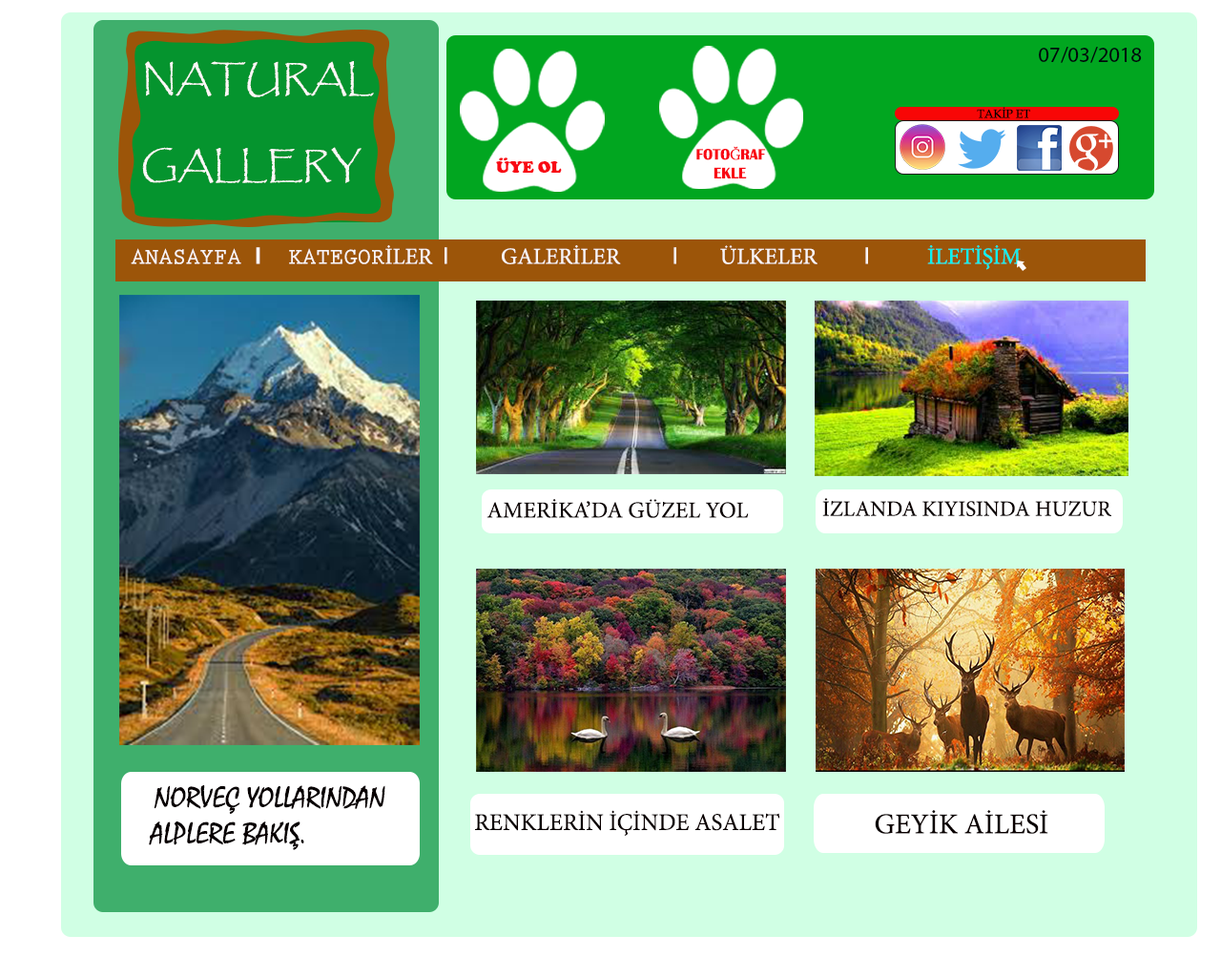
<style>
.page{position:relative;width:1221px;height:977px;background:#d0ffe4}
.page>*{position:absolute;margin:0}
.t1{font:21.7px "MyriadPro-Regular";color:#00090c}
.t2{font:36.1px "Papyrus-Regular";color:#fcf8f8}
.t3{font:11.9px "BookAntiqua";color:#030000}
.t4{font:15.6px "BritannicBold";color:#f80914;scale:0.95 1}
.t5{font:15.6px "MinionPro-Regular";color:#f80914;scale:0.95 1}
.t6{font:16.4px "CooperBlack";color:#f80914}
.t7{font:22.9px "MinionPro-Regular";color:#f9f5f5}
.t8{font:22.9px "PrestigeEliteStd-Bd";color:#f9f5f5}
.t9{font:22.9px "Arial-BoldMT";color:#f9f5f5}
.t10{font:22.9px "ArialMT";color:#f9f5f5}
.t11{font:22.9px "MinionPro-Regular";color:#08f3f0}
.t12{font:21.9px "MinionPro-Regular";color:#0a0000}
.t13{font:22.9px "MinionPro-Regular";color:#0a0000}
.t14{font:30px "Mistral";color:#080001}
.t15{font:23.8px "MinionPro-Regular";color:#0a0000}
.t16{font:28.6px "MinionPro-Regular";color:#0a0000}
</style>
<div class="page">
<p class="t1" style="left:1039px;top:47px;width:103px;height:16px">07/03/2018</p>
<p class="t2" style="left:142px;top:61px;width:232px;height:122px">NATURAL<br><br>GALLERY</p>
<p class="t3" style="left:977px;top:107px;width:53px;height:11px">TAKİP ET</p>
<p class="t4" style="left:696px;top:146px;width:70px;height:32px">FOTO<span class="t5">Ğ</span>RAF<br>    EKLE</p>
<p class="t6" style="left:496px;top:157px;width:66px;height:17px">ÜYE OL</p>
<p class="t7" style="left:131px;top:245px;width:890px;height:25px"><span class="t8">ANASAYFA </span><span class="t9">I</span><span class="t8">  KATEGOR</span>İLER  <span class="t10">I</span>          GALERİLER          <span class="t10">I</span>        ÜLKELER         <span class="t10">I           </span><span class="t11">İLETİŞİM</span></p>
<p class="t12" style="left:822px;top:498px;width:289px;height:18px">İZLANDA KIYISINDA HUZUR</p>
<p class="t13" style="left:486px;top:499px;width:263px;height:19px">AMERİKA’DA GÜZEL YOL</p>
<p class="t14" style="left:149px;top:785px;width:236px;height:65px">NORVEÇ YOLLARINDAN          ALPLERE BAKIŞ.</p>
<p class="t15" style="left:475px;top:810px;width:304px;height:26px">RENKLERİN İÇİNDE ASALET</p>
<p class="t16" style="left:875px;top:810px;width:173px;height:24px">GEYİK AİLESİ</p>
</div>
